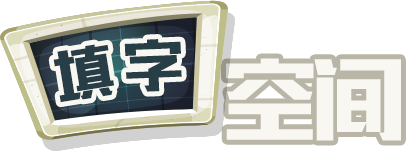
<style>
.page{position:relative;width:407px;height:153px;background:#ffffff}
.page>*{position:absolute;margin:0}
.t1{font:70px "MFBanHei_Noncommercial-Regular";color:#283e47;scale:0.8 1}
.t2{font:110px "MFBanHei_Noncommercial-Regular";color:#f8f7f2;scale:0.8 1}
</style>
<div class="page">
<p class="t1" style="left:124px;top:39px;width:58px;height:53px;rotate:-2deg">字</p>
<p class="t1" style="left:53px;top:44px;width:61px;height:59px;rotate:-9deg">填</p>
<p class="t2" style="left:226px;top:58px;width:175px;height:83px">空间</p>
</div>
